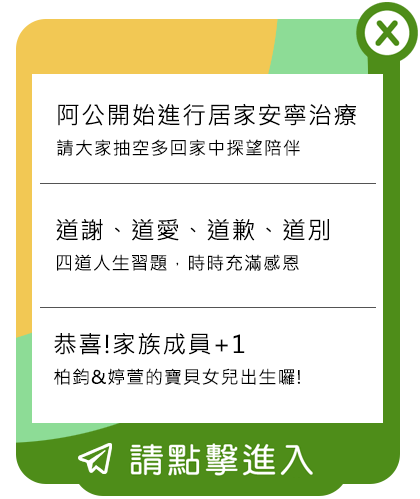
<style>
.page{position:relative;width:420px;height:499px;background:#ffffff}
.page>*{position:absolute;margin:0}
.t1{font:18px/36px "MicrosoftJhengHeiRegular";letter-spacing:0.05em;color:#010101}
.t2{font:24px/36px "MicrosoftJhengHeiRegular";letter-spacing:0.05em;color:#010101}
.t3{font:18px/36px "MicrosoftJhengHeiRegular";letter-spacing:0.05em;color:#000000}
.t4{font:24px/36px "MicrosoftJhengHeiRegular";letter-spacing:0.05em;color:#000000}
</style>
<div class="page">
<p class="t1" style="left:57px;top:103px;width:299px;height:53px"><span class="t2">阿公開始進行居家安寧治療<br></span>請大家抽空多回家中探望陪伴</p>
<p class="t3" style="left:56px;top:219px;width:273px;height:52px"><span class="t4">道謝、道愛、道歉、道別<br></span>四道人生習題，時時充滿感恩</p>
<p class="t3" style="left:54px;top:332px;width:246px;height:53px"><span class="t4">恭喜!家族成員+1<br></span>柏鈞&amp;婷萱的寶貝女兒出生囉!</p>
</div>
